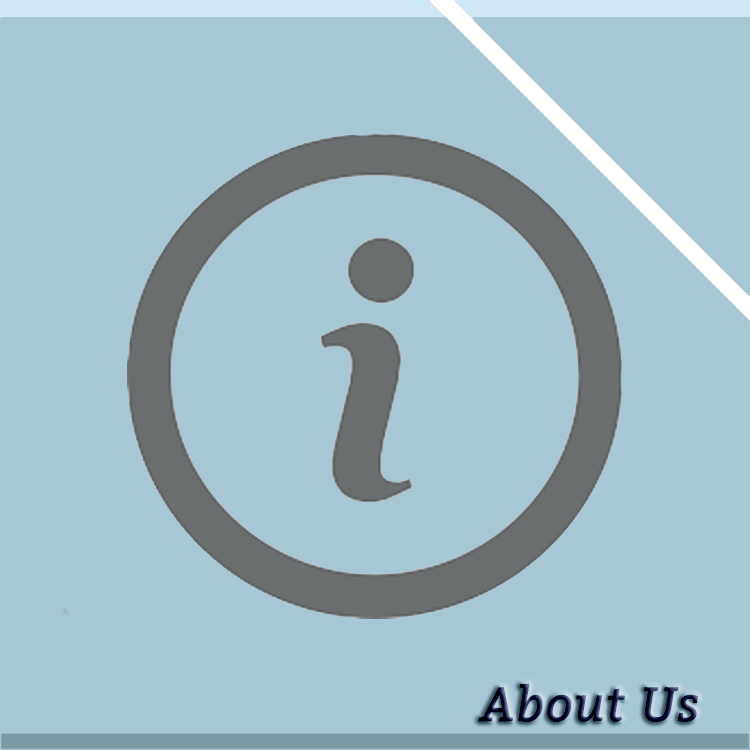
<style>
.page{position:relative;width:750px;height:750px;background:#a8c7d5}
.page>*{position:absolute;margin:0}
.t1{font:48px "Bitter-Italic";font-weight:bold}
</style>
<div class="page">
<p class="t1" style="left:478px;top:683px;width:220px;height:39px">About Us</p>
</div>
